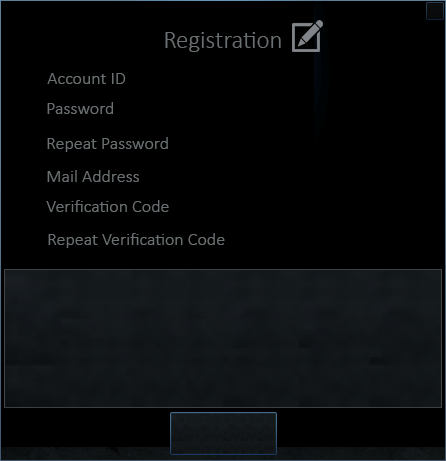
<style>
.page{position:relative;width:446px;height:461px;background:#000000}
.page>*{position:absolute;margin:0}
.t1{font:25px "Calibri-Light";color:#6a6f71}
.t2{font:18px "Calibri-Light";color:#6a6f71}
</style>
<div class="page">
<p class="t1" style="left:165px;top:32px;width:116px;height:20px">Registration</p>
<p class="t2" style="left:47px;top:73px;width:79px;height:11px">Account ID</p>
<p class="t2" style="left:47px;top:102px;width:66px;height:12px">Password</p>
<p class="t2" style="left:47px;top:137px;width:121px;height:15px">Repeat Password</p>
<p class="t2" style="left:47px;top:170px;width:92px;height:12px">Mail Address</p>
<p class="t2" style="left:46px;top:200px;width:123px;height:12px">Verification Code</p>
<p class="t2" style="left:48px;top:233px;width:177px;height:15px">Repeat Verification Code</p>
</div>
